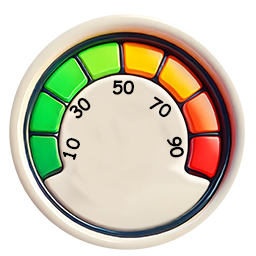
<style>
.page{position:relative;width:256px;height:256px;background:#ffffff}
.page>*{position:absolute;margin:0}
.t1{font:18px "ComicSansMS-Bold";color:#000000}
</style>
<div class="page">
<p class="t1" style="left:112px;top:80px;width:22px;height:15px;rotate:2deg">50</p>
<p class="t1" style="left:69px;top:98px;width:22px;height:21px;rotate:-45deg">30</p>
<p class="t1" style="left:149px;top:96px;width:22px;height:21px;rotate:33deg">70</p>
<p class="t1" style="left:167px;top:136px;width:17px;height:22px;rotate:79deg">90</p>
<p class="t1" style="left:63px;top:138px;width:17px;height:22px;rotate:-72deg">10</p>
</div>
